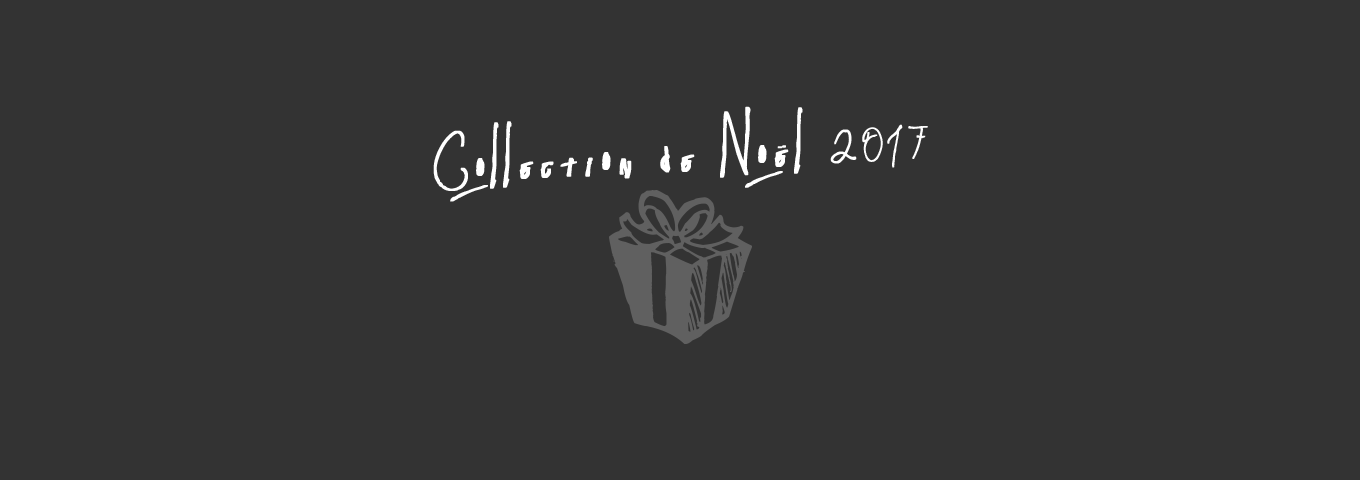
<style>
.page{position:relative;width:1360px;height:480px;background:#333333}
.page>*{position:absolute;margin:0}
.t1{font:79.4px "Pappo'sBluesBandOfficialFont";letter-spacing:0.1em;color:#ffffff;font-weight:bold}
.t2{font:47.6px "Pappo'sBluesBandOfficialFont";letter-spacing:0.1em;color:#ffffff;font-weight:bold}
</style>
<div class="page">
<p class="t1" style="left:433px;top:106px;width:495px;height:96px;rotate:-3deg">Collection de Noël <span class="t2">2017</span></p>
</div>
